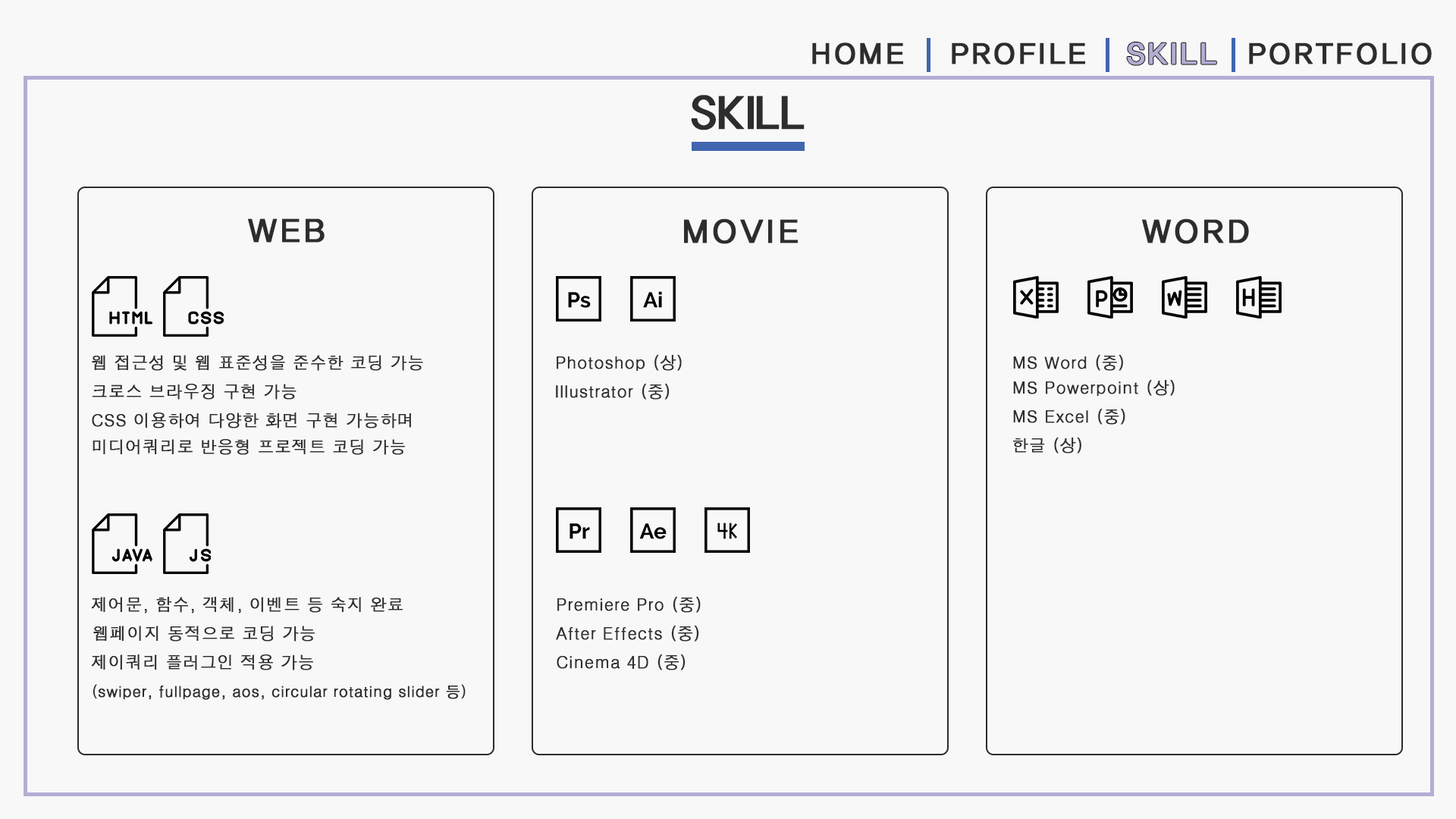
<style>
.page{position:relative;width:1456px;height:819px;background:#f8f8f8}
.page>*{position:absolute;margin:0}
.t1{font:30.3px "HaanYGodic23";color:#2d2d2d;font-weight:bold}
.t2{font:45.5px "HaanYHeadL";color:#2d2d2d;font-weight:bold}
.t3{font:34.1px "HaanYGodic23";color:#2d2d2d;font-weight:bold}
.t4{font:16.7px "H2gtrM";color:#2d2d2d;font-weight:bold}
.t5{font:15.2px "H2gtrM";color:#2d2d2d;font-weight:bold}
</style>
<div class="page">
<p class="t1" style="left:812px;top:42px;width:91px;height:23px">HOME</p>
<p class="t1" style="left:952px;top:42px;width:133px;height:23px">PROFILE</p>
<p class="t1" style="left:1249px;top:42px;width:183px;height:23px">PORTFOLIO</p>
<p class="t2" style="left:691px;top:95px;width:114px;height:35px">SKILL</p>
<p class="t3" style="left:248px;top:218px;width:77px;height:25px">WEB</p>
<p class="t3" style="left:684px;top:218px;width:114px;height:26px">MOVIE</p>
<p class="t3" style="left:1142px;top:218px;width:107px;height:26px">WORD</p>
<p class="t4" style="left:92px;top:355px;width:331px;height:16px">웹 접근성 및 웹 표준성을 준수한 코딩 가능</p>
<p class="t4" style="left:557px;top:354px;width:125px;height:17px">Photoshop (상)</p>
<p class="t4" style="left:1013px;top:354px;width:110px;height:17px">MS Word (중)</p>
<p class="t4" style="left:92px;top:384px;width:205px;height:16px">크로스 브라우징 구현 가능</p>
<p class="t4" style="left:556px;top:383px;width:114px;height:17px">Illustrator (중)</p>
<p class="t4" style="left:1013px;top:379px;width:162px;height:17px">MS Powerpoint (상)</p>
<p class="t4" style="left:92px;top:413px;width:319px;height:15px">CSS 이용하여 다양한 화면 구현 가능하며</p>
<p class="t4" style="left:1013px;top:408px;width:112px;height:17px">MS Excel (중)</p>
<p class="t4" style="left:1012px;top:437px;width:69px;height:16px">한글 (상)</p>
<p class="t4" style="left:93px;top:439px;width:312px;height:16px">미디어쿼리로 반응형 프로젝트 코딩 가능</p>
<p class="t4" style="left:91px;top:597px;width:312px;height:16px">제어문, 함수, 객체, 이벤트 등 숙지 완료</p>
<p class="t4" style="left:557px;top:596px;width:144px;height:17px">Premiere Pro (중)</p>
<p class="t4" style="left:93px;top:626px;width:222px;height:16px">웹페이지 동적으로 코딩 가능</p>
<p class="t4" style="left:556px;top:625px;width:143px;height:17px">After Effects (중)</p>
<p class="t4" style="left:557px;top:654px;width:129px;height:16px">Cinema 4D (중)</p>
<p class="t4" style="left:91px;top:654px;width:222px;height:16px">제이쿼리 플러그인 적용 가능</p>
<p class="t5" style="left:93px;top:684px;width:373px;height:16px">(swiper, fullpage, aos, circular rotating slider 등)</p>
</div>
